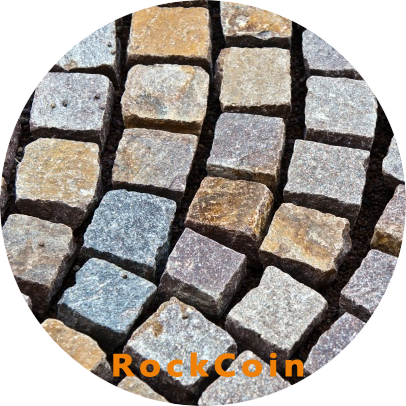
<style>
.page{position:relative;width:406px;height:406px;background:#ffffff}
.page>*{position:absolute;margin:0}
.t1{font:28.8px "MicrosoftYaHei-Bold";letter-spacing:0.15em;color:#ee7f07;font-weight:bold;scale:1.12 1}
</style>
<div class="page">
<p class="t1" style="left:113px;top:352px;width:191px;height:25px">RockCoin</p>
</div>
